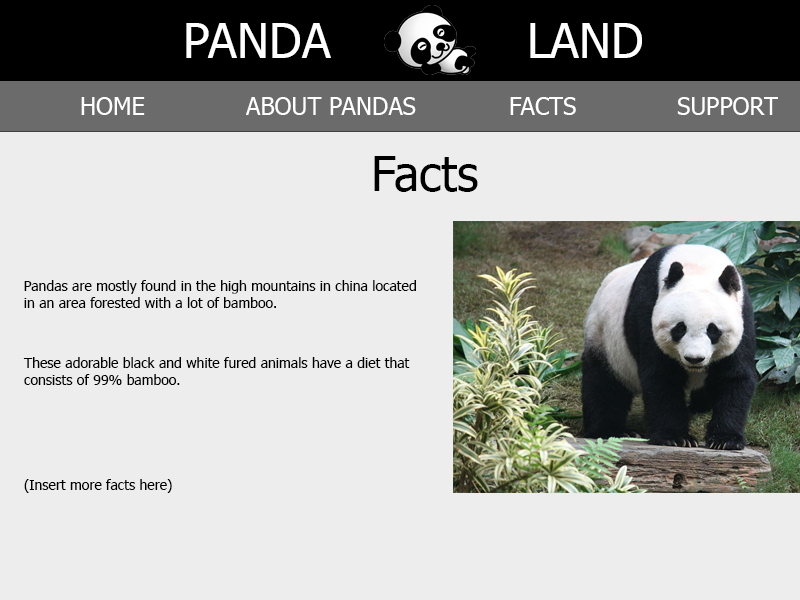
<style>
.page{position:relative;width:800px;height:600px;background:#ededed}
.page>*{position:absolute;margin:0}
.t1{font:48px "Tahoma";color:#ffffff}
.t2{font:24px "Tahoma";color:#ffffff}
.t3{font:48px "Tahoma";color:#000000}
.t4{font:14px "Tahoma";color:#000000}
</style>
<div class="page">
<p class="t1" style="left:186px;top:23px;width:145px;height:35px">PANDA</p>
<p class="t1" style="left:530px;top:23px;width:112px;height:35px">LAND</p>
<p class="t2" style="left:81px;top:97px;width:64px;height:18px">HOME</p>
<p class="t2" style="left:246px;top:97px;width:170px;height:18px">ABOUT PANDAS</p>
<p class="t2" style="left:510px;top:97px;width:66px;height:18px">FACTS</p>
<p class="t2" style="left:677px;top:97px;width:101px;height:18px">SUPPORT</p>
<p class="t3" style="left:374px;top:156px;width:104px;height:36px">Facts</p>
<p class="t4" style="left:24px;top:280px;width:392px;height:28px">Pandas are mostly found in the high mountains in china located <br>in an area forested with a lot of bamboo.</p>
<p class="t4" style="left:23px;top:357px;width:387px;height:28px">These adorable black and white fured animals have a diet that <br>consists of 99% bamboo.</p>
<p class="t4" style="left:24px;top:479px;width:148px;height:14px">(Insert more facts here)</p>
</div>
